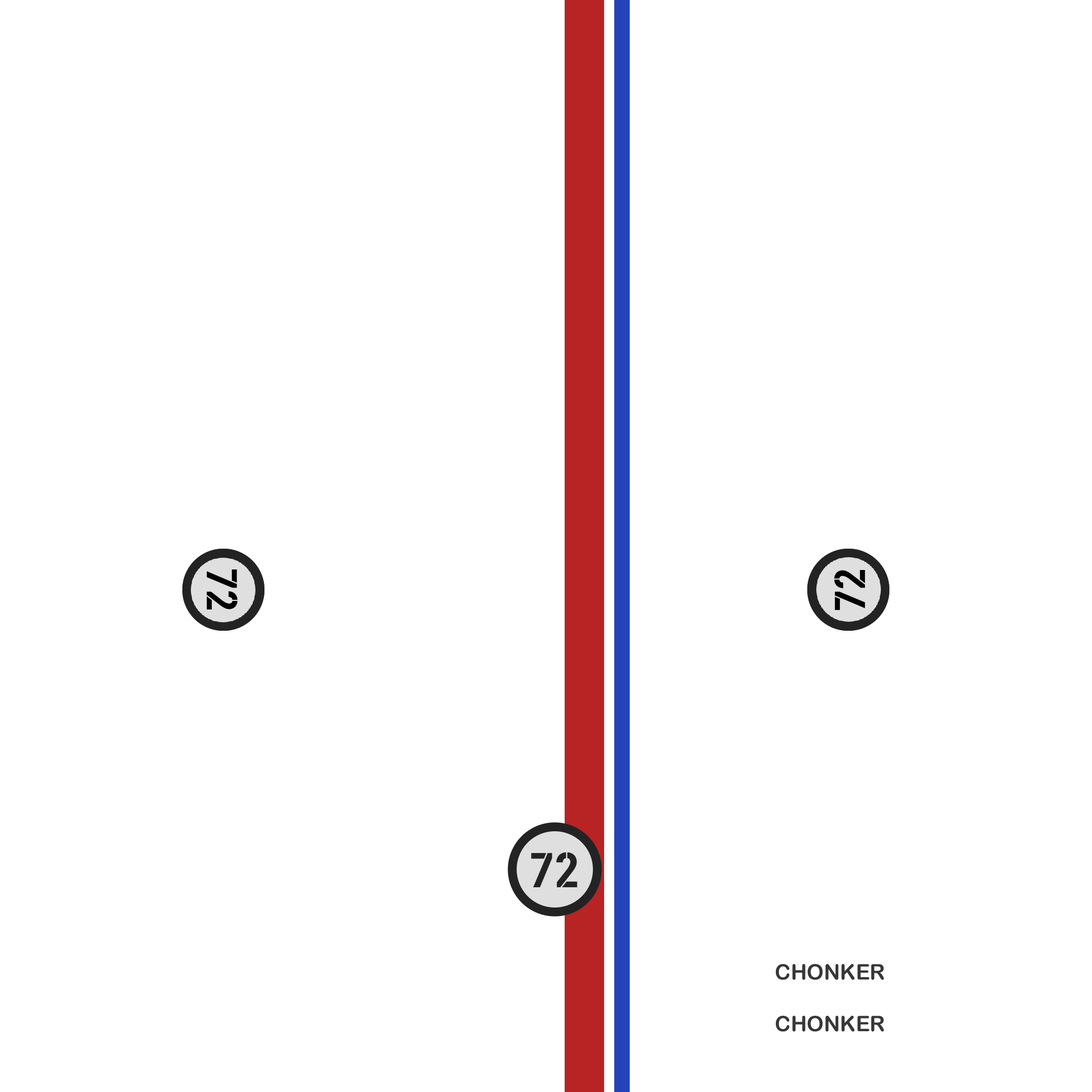
<style>
.page{position:relative;width:1092px;height:1092px;background:#ffffff}
.page>*{position:absolute;margin:0}
.t1{font:42.5px "ForsvarsmaktenSans-Stencil";color:#000000}
.t2{font:48.3px "ForsvarsmaktenSans-Stencil";color:#232323}
.t3{font:21.3px "ArialRoundedMTBold";color:#373737}
</style>
<div class="page">
<p class="t1" style="left:206px;top:569px;width:32px;height:40px;rotate:90deg">72</p>
<p class="t1" style="left:206px;top:569px;width:32px;height:40px;rotate:90deg">72</p>
<p class="t1" style="left:834px;top:570px;width:31px;height:40px;rotate:-90deg">72</p>
<p class="t1" style="left:834px;top:570px;width:31px;height:40px;rotate:-90deg">72</p>
<p class="t2" style="left:531px;top:852px;width:46px;height:35px">72</p>
<p class="t3" style="left:776px;top:964px;width:108px;height:16px">CHONKER</p>
<p class="t3" style="left:776px;top:1016px;width:108px;height:16px">CHONKER</p>
</div>
